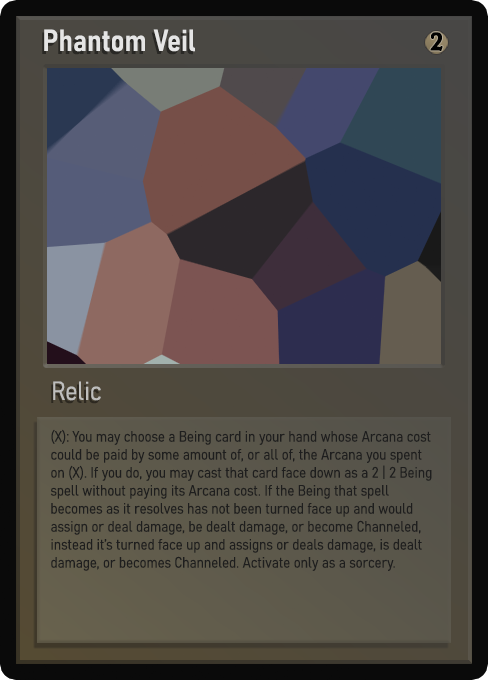
<style>
.page{position:relative;width:488px;height:680px}
.page>*{position:absolute;margin:0}
.t1{font:30px "Bahnschrift-SemiBoldSemiCondensed";color:#f2f2f2;font-weight:bold}
.t2{font:25px "WTRRoycroft";color:#000000;font-weight:bold;scale:1.09 1}
.t3{font:26px "Bahnschrift-LightSemiCondensed";color:#c8c8c8;font-weight:bold}
.t4{font:15px "Bahnschrift-LightSemiCondensed";color:#1e1e1e;font-weight:bold}
</style>
<div class="page">
<p class="t1" style="left:44px;top:29px;width:151px;height:23px;opacity:0.9">Phantom Veil</p>
<p class="t2" style="left:430px;top:32px;width:13px;height:19px">2</p>
<p class="t3" style="left:53px;top:381px;width:48px;height:20px;opacity:0.9">Relic</p>
<p class="t4" style="left:50px;top:429px;width:382px;height:142px">(X): You may choose a Being card in your hand whose Arcana cost could be paid by some amount of, or all of, the Arcana you spent on (X). If you do, you may cast that card face down as a 2 | 2 Being spell without paying its Arcana cost. If the Being that spell becomes as it resolves has not been turned face up and would assign or deal damage, be dealt damage, or become Channeled, instead it’s turned face up and assigns or deals damage, is dealt damage, or becomes Channeled. Activate only as a sorcery.</p>
</div>
